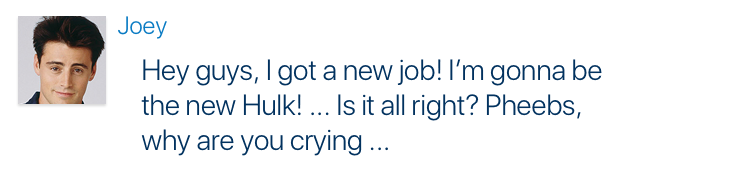
<style>
.page{position:relative;width:750px;height:187px;background:#ffffff}
.page>*{position:absolute;margin:0}
.t1{font:25px "SFUIDisplay-Light";color:#0a7bc3}
.t2{font:29.2px "SFUIDisplay-Light";color:#02325f}
</style>
<div class="page">
<p class="t1" style="left:118px;top:16px;width:49px;height:23px">Joey</p>
<p class="t2" style="left:141px;top:59px;width:461px;height:97px">Hey guys, I got a new job! I’m gonna be the new Hulk! ... Is it all right? Pheebs, why are you crying ...</p>
</div>
